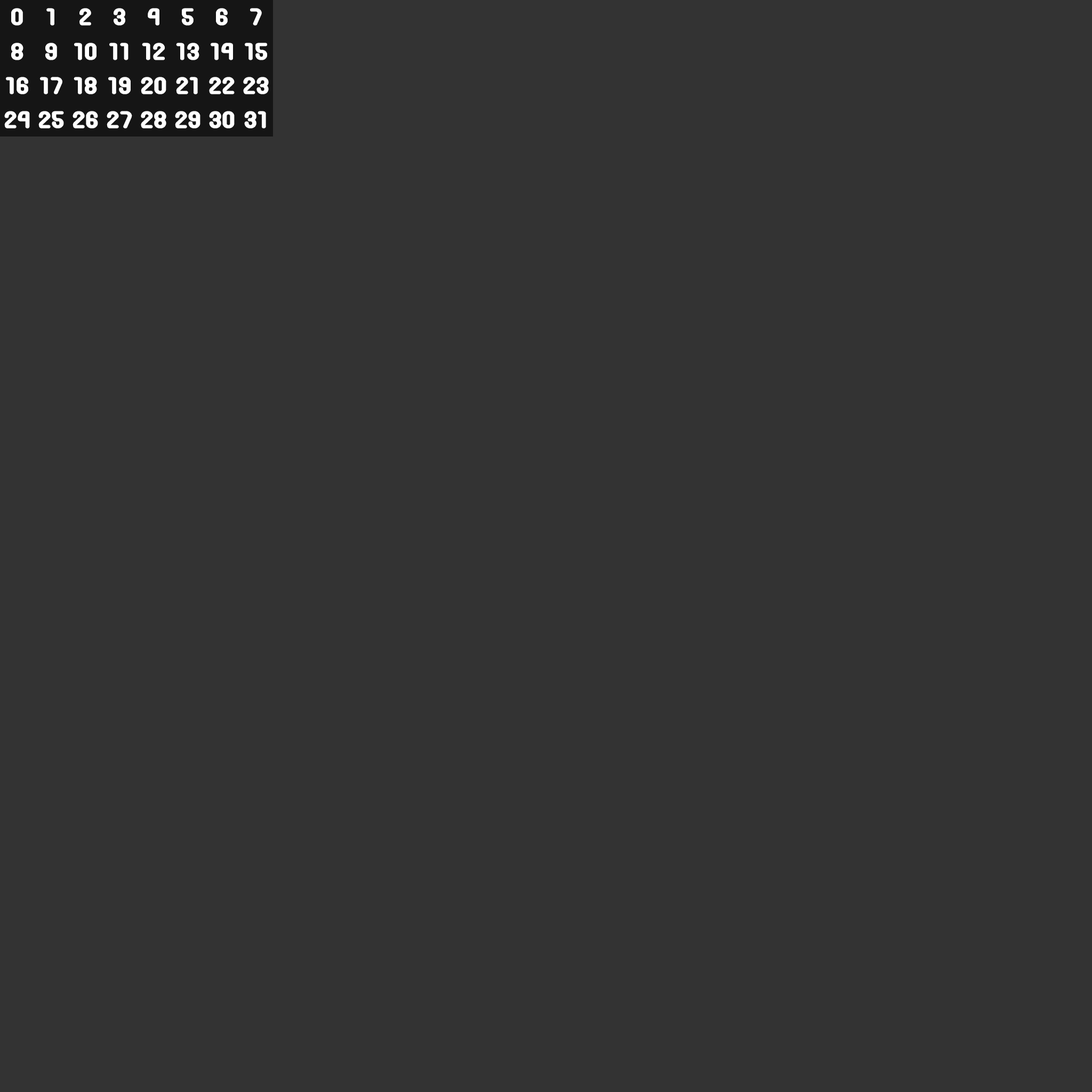
<style>
.page{position:relative;width:1092px;height:1092px;background:#333333}
.page>*{position:absolute;margin:0}
.t1{font:20.8px "Round_Pop";color:#ffffff}
</style>
<div class="page">
<p class="t1" style="left:11px;top:8px;width:12px;height:18px">0</p>
<p class="t1" style="left:46px;top:8px;width:8px;height:18px">1</p>
<p class="t1" style="left:79px;top:8px;width:12px;height:18px">2</p>
<p class="t1" style="left:114px;top:8px;width:11px;height:18px">3</p>
<p class="t1" style="left:148px;top:8px;width:11px;height:18px">4</p>
<p class="t1" style="left:182px;top:8px;width:12px;height:18px">5</p>
<p class="t1" style="left:216px;top:8px;width:12px;height:18px">6</p>
<p class="t1" style="left:250px;top:8px;width:12px;height:18px">7</p>
<p class="t1" style="left:11px;top:43px;width:12px;height:17px">8</p>
<p class="t1" style="left:45px;top:43px;width:12px;height:17px">9</p>
<p class="t1" style="left:74px;top:43px;width:23px;height:17px">10</p>
<p class="t1" style="left:109px;top:43px;width:20px;height:17px">11</p>
<p class="t1" style="left:142px;top:43px;width:23px;height:17px">12</p>
<p class="t1" style="left:176px;top:43px;width:23px;height:17px">13</p>
<p class="t1" style="left:211px;top:43px;width:22px;height:17px">14</p>
<p class="t1" style="left:245px;top:43px;width:22px;height:17px">15</p>
<p class="t1" style="left:6px;top:77px;width:22px;height:17px">16</p>
<p class="t1" style="left:40px;top:77px;width:22px;height:17px">17</p>
<p class="t1" style="left:74px;top:77px;width:23px;height:17px">18</p>
<p class="t1" style="left:108px;top:77px;width:23px;height:17px">19</p>
<p class="t1" style="left:141px;top:77px;width:25px;height:17px">20</p>
<p class="t1" style="left:176px;top:77px;width:22px;height:17px">21</p>
<p class="t1" style="left:209px;top:77px;width:26px;height:17px">22</p>
<p class="t1" style="left:243px;top:77px;width:26px;height:17px">23</p>
<p class="t1" style="left:4px;top:111px;width:26px;height:18px">24</p>
<p class="t1" style="left:38px;top:111px;width:26px;height:18px">25</p>
<p class="t1" style="left:73px;top:111px;width:25px;height:18px">26</p>
<p class="t1" style="left:107px;top:111px;width:25px;height:18px">27</p>
<p class="t1" style="left:141px;top:111px;width:25px;height:18px">28</p>
<p class="t1" style="left:175px;top:111px;width:25px;height:18px">29</p>
<p class="t1" style="left:209px;top:111px;width:26px;height:18px">30</p>
<p class="t1" style="left:244px;top:111px;width:22px;height:18px">31</p>
</div>
